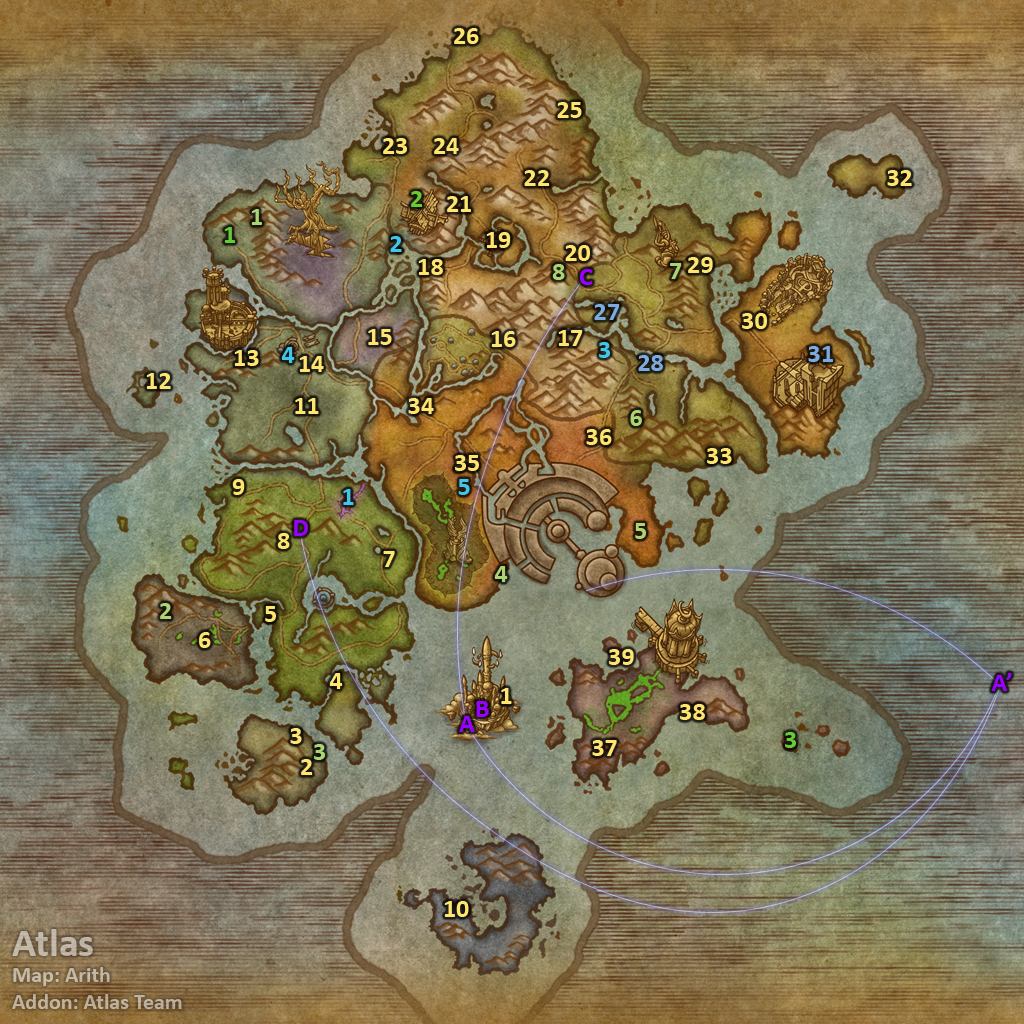
<style>
.page{position:relative;width:1024px;height:1024px}
.page>*{position:absolute;margin:0}
.t1{font:26px "Calibri-Bold";color:#fee570}
.t2{font:26px "Calibri-Bold";color:#66cc33}
.t3{font:26px "Calibri-Bold";color:#abd473}
.t4{font:26px "Calibri-Bold";color:#3fc7eb}
.t5{font:26px "Calibri-Bold";color:#9900ff}
.t6{font:26px "Calibri-Bold";color:#7babe0}
.t7{font:22px "Calibri-Bold";color:#c1b4a3}
.t8{font:40px "Calibri-Bold";color:#c1b4a3}
</style>
<div class="page">
<p class="t1" style="left:454px;top:28px;width:25px;height:16px">26</p>
<p class="t1" style="left:557px;top:102px;width:25px;height:16px">25</p>
<p class="t1" style="left:383px;top:138px;width:24px;height:16px">23</p>
<p class="t1" style="left:434px;top:138px;width:25px;height:16px">24</p>
<p class="t1" style="left:524px;top:170px;width:26px;height:16px">22</p>
<p class="t1" style="left:887px;top:170px;width:25px;height:16px">32</p>
<p class="t2" style="left:411px;top:191px;width:12px;height:16px">2</p>
<p class="t1" style="left:447px;top:196px;width:24px;height:16px">21</p>
<p class="t3" style="left:251px;top:209px;width:11px;height:16px">1</p>
<p class="t2" style="left:224px;top:227px;width:11px;height:16px">1</p>
<p class="t1" style="left:486px;top:232px;width:25px;height:16px">19</p>
<p class="t4" style="left:390px;top:236px;width:12px;height:16px">2</p>
<p class="t1" style="left:565px;top:245px;width:25px;height:16px">20</p>
<p class="t1" style="left:688px;top:257px;width:25px;height:16px">29</p>
<p class="t1" style="left:418px;top:259px;width:25px;height:16px">18</p>
<p class="t3" style="left:552px;top:264px;width:13px;height:16px">8</p>
<p class="t5" style="left:580px;top:269px;width:13px;height:16px">C</p>
<p class="t3" style="left:670px;top:263px;width:12px;height:16px">7</p>
<p class="t6" style="left:594px;top:304px;width:26px;height:16px">27</p>
<p class="t1" style="left:742px;top:313px;width:25px;height:16px">30</p>
<p class="t1" style="left:368px;top:329px;width:24px;height:16px">15</p>
<p class="t1" style="left:491px;top:331px;width:25px;height:16px">16</p>
<p class="t1" style="left:558px;top:330px;width:25px;height:16px">17</p>
<p class="t4" style="left:599px;top:342px;width:11px;height:16px">3</p>
<p class="t1" style="left:234px;top:350px;width:25px;height:16px">13</p>
<p class="t4" style="left:281px;top:347px;width:14px;height:16px">4</p>
<p class="t6" style="left:808px;top:346px;width:25px;height:16px">31</p>
<p class="t1" style="left:299px;top:356px;width:25px;height:16px">14</p>
<p class="t6" style="left:638px;top:355px;width:25px;height:16px">28</p>
<p class="t1" style="left:146px;top:373px;width:25px;height:16px">12</p>
<p class="t1" style="left:295px;top:398px;width:24px;height:16px">11</p>
<p class="t1" style="left:408px;top:398px;width:26px;height:16px">34</p>
<p class="t3" style="left:630px;top:410px;width:12px;height:16px">6</p>
<p class="t1" style="left:586px;top:429px;width:26px;height:16px">36</p>
<p class="t1" style="left:707px;top:448px;width:25px;height:16px">33</p>
<p class="t1" style="left:455px;top:455px;width:24px;height:16px">35</p>
<p class="t1" style="left:232px;top:479px;width:13px;height:16px">9</p>
<p class="t4" style="left:458px;top:479px;width:12px;height:16px">5</p>
<p class="t4" style="left:343px;top:489px;width:11px;height:16px">1</p>
<p class="t5" style="left:294px;top:520px;width:14px;height:16px">D</p>
<p class="t1" style="left:277px;top:533px;width:13px;height:16px">8</p>
<p class="t3" style="left:635px;top:523px;width:11px;height:16px">5</p>
<p class="t1" style="left:383px;top:551px;width:12px;height:16px">7</p>
<p class="t3" style="left:494px;top:566px;width:14px;height:16px">4</p>
<p class="t3" style="left:160px;top:603px;width:12px;height:16px">2</p>
<p class="t1" style="left:265px;top:606px;width:11px;height:16px">5</p>
<p class="t1" style="left:199px;top:632px;width:12px;height:16px">6</p>
<p class="t1" style="left:609px;top:649px;width:25px;height:16px">39</p>
<p class="t1" style="left:329px;top:673px;width:14px;height:16px">4</p>
<p class="t5" style="left:991px;top:673px;width:21px;height:18px">A’</p>
<p class="t1" style="left:501px;top:688px;width:11px;height:16px">1</p>
<p class="t5" style="left:476px;top:701px;width:13px;height:16px">B</p>
<p class="t1" style="left:680px;top:704px;width:25px;height:16px">38</p>
<p class="t5" style="left:459px;top:716px;width:16px;height:16px">A</p>
<p class="t1" style="left:290px;top:728px;width:12px;height:16px">3</p>
<p class="t2" style="left:785px;top:732px;width:11px;height:16px">3</p>
<p class="t3" style="left:314px;top:744px;width:11px;height:16px">3</p>
<p class="t1" style="left:592px;top:740px;width:25px;height:16px">37</p>
<p class="t1" style="left:301px;top:759px;width:12px;height:16px">2</p>
<p class="t1" style="left:444px;top:901px;width:25px;height:16px">10</p>
<p class="t7" style="left:12px;top:929px;width:170px;height:80px"><span class="t8">Atlas<br></span>Map: Arith<br>Addon: Atlas Team</p>
</div>
